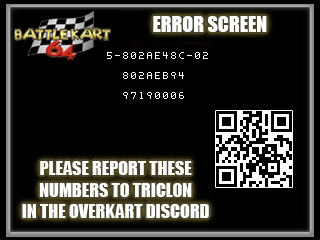
<style>
.page{position:relative;width:320px;height:240px;background:#000000}
.page>*{position:absolute;margin:0}
.t1{font:20px "Impact";color:#ffffff}
.t2{font:18px "Impact";color:#ffffff}
</style>
<div class="page">
<p class="t1" style="left:153px;top:16px;width:114px;height:16px">ERROR SCREEN</p>
<p class="t2" style="left:22px;top:161px;width:187px;height:57px;text-align:center">PLEASE REPORT THESE <br>NUMBERS TO TRICLON<br>IN THE OVERKART DISCORD</p>
</div>
